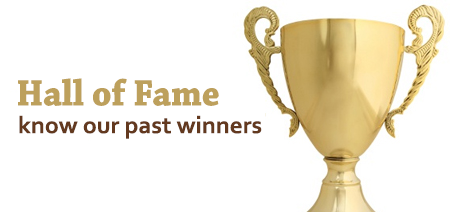
<style>
.page{position:relative;width:450px;height:212px;background:#ffffff}
.page>*{position:absolute;margin:0}
.t1{font:38.4px "ChaparralPro-Bold";color:#bda05c;scale:0.93 1}
.t2{font:24.4px "Corbel-Bold";color:#63391f;scale:1.03 1}
</style>
<div class="page">
<p class="t1" style="left:18px;top:78px;width:201px;height:28px">Hall of Fame</p>
<p class="t2" style="left:19px;top:115px;width:243px;height:24px">know our past winners</p>
</div>
